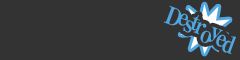
<style>
.page{position:relative;width:240px;height:60px;background:#333333}
.page>*{position:absolute;margin:0}
.t1{font:24px "RyuminPro-ExBold";letter-spacing:-0.16em;color:#50a6dd;scale:0.9 1}
</style>
<div class="page">
<p class="t1" style="left:163px;top:5px;width:73px;height:50px;rotate:21deg">Destroyed</p>
</div>
